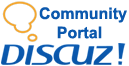
<style>
.page{position:relative;width:129px;height:66px;background:#ffffff}
.page>*{position:absolute;margin:0}
.t1{font:16px "Arial-BoldMT";color:#0b58ad}
</style>
<div class="page">
<p class="t1" style="left:39px;top:5px;width:88px;height:39px">Community<br>    Portal</p>
</div>
